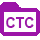
<style>
.page{position:relative;width:40px;height:40px;background:#ffffff}
.page>*{position:absolute;margin:0}
.t1{font:14.6px "Arial-BoldMT";color:#9c15a8;scale:0.97 1}
</style>
<div class="page">
<p class="t1" style="left:6px;top:17px;width:28px;height:11px">CTC</p>
</div>
